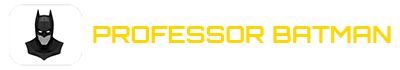
<style>
.page{position:relative;width:400px;height:70px;background:#ffffff}
.page>*{position:absolute;margin:0}
.t1{font:23.9px "Orbitron-Bold";color:#ffd700}
</style>
<div class="page">
<p class="t1" style="left:93px;top:26px;width:298px;height:17px">PROFESSOR BATMAN</p>
</div>
